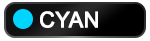
<style>
.page{position:relative;width:150px;height:41px;background:#ffffff}
.page>*{position:absolute;margin:0}
.t1{font:21.6px "ArialMT";color:#ffffff;font-weight:bold}
</style>
<div class="page">
<p class="t1" style="left:40px;top:11px;width:58px;height:17px">CYAN</p>
</div>
